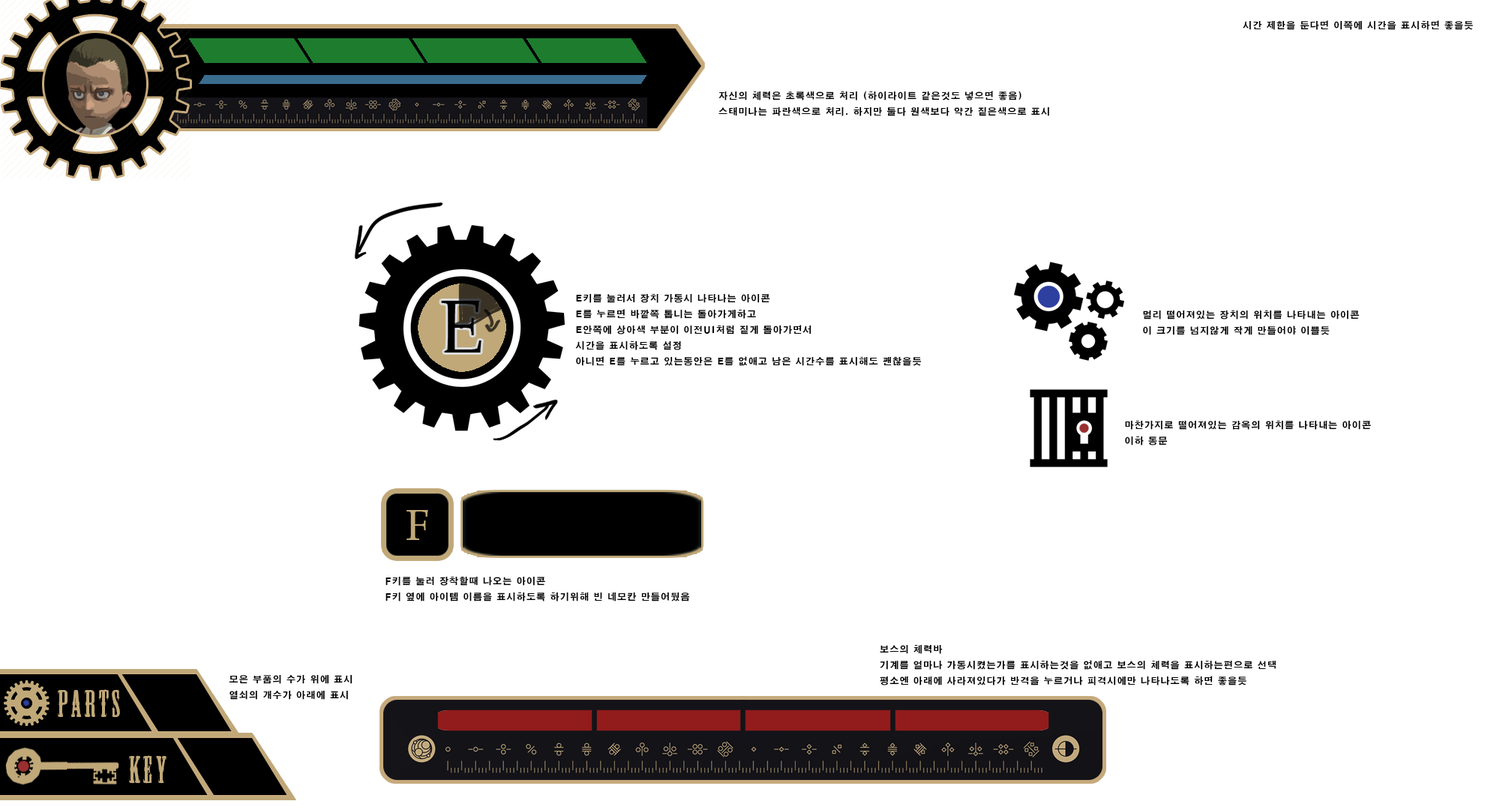
<style>
.page{position:relative;width:1485px;height:810px;background:#ffffff}
.page>*{position:absolute;margin:0}
.t1{font:9px "H2gtrE";letter-spacing:0.1em;color:#000000}
.t2{font:75px "PalatinoLinotype-Roman";letter-spacing:0.1em;color:#000000}
.t3{font:43.2px "PalatinoLinotype-Roman";letter-spacing:0.1em;color:#c0a878}
.t4{font:36px "MesquiteStd";letter-spacing:0.1em;color:#c0a878}
</style>
<div class="page">
<p class="t1" style="left:1243px;top:20px;width:230px;height:10px">시간 제한을 둔다면 이쪽에 시간을 표시하면 좋을듯</p>
<p class="t1" style="left:718px;top:91px;width:331px;height:25px">자신의 체력은 초록색으로 처리 (하이라이트 같은것도 넣으면 좋음)<br>스태미나는 파란색으로 처리. 하지만 둘다 원색보다 약간 짙은색으로 표시</p>
<p class="t1" style="left:575px;top:293px;width:346px;height:73px">E키를 눌러서 장치 가동시 나타나는 아이콘<br>E를 누르면 바깥쪽 톱니는 돌아가게하고<br>E안쪽에 상아색 부분이 이전UI처럼 짙게 돌아가면서<br>시간을 표시하도록 설정<br>아니면 E를 누르고 있는동안은 E를 없애고 남은 시간수를 표시해도 괜찮을듯</p>
<p class="t2" style="left:441px;top:301px;width:41px;height:51px">E</p>
<p class="t1" style="left:1143px;top:310px;width:217px;height:25px">멀리 떨어져있는 장치의 위치를 나타내는 아이콘<br>이 크기를 넘지않게 작게 만들어야 이쁠듯</p>
<p class="t1" style="left:1125px;top:420px;width:246px;height:26px">마찬가지로 떨어져있는 감옥의 위치를 나타내는 아이콘<br>이하 동문</p>
<p class="t3" style="left:406px;top:510px;width:22px;height:30px">F</p>
<p class="t1" style="left:386px;top:576px;width:304px;height:26px">F키를 눌러 장착할때 나오는 아이콘<br>F키 옆에 아이템 이름을 표시하도록 하기위해 빈 네모칸 만들어뒀음</p>
<p class="t1" style="left:880px;top:644px;width:396px;height:42px">보스의 체력바<br>기계를 얼마나 가동시켰는가를 표시하는것을 없애고 보스의 체력을 표시하는편으로 선택<br>평소엔 아래에 사라져있다가 반격을 누르거나 피격시에만 나타나도록 하면 좋을듯</p>
<p class="t1" style="left:229px;top:674px;width:123px;height:26px">모은 부품의 수가 위에 표시<br>열쇠의 개수가 아래에 표시</p>
<p class="t4" style="left:58px;top:689px;width:62px;height:29px">Parts</p>
<p class="t4" style="left:129px;top:755px;width:37px;height:29px">key</p>
</div>
